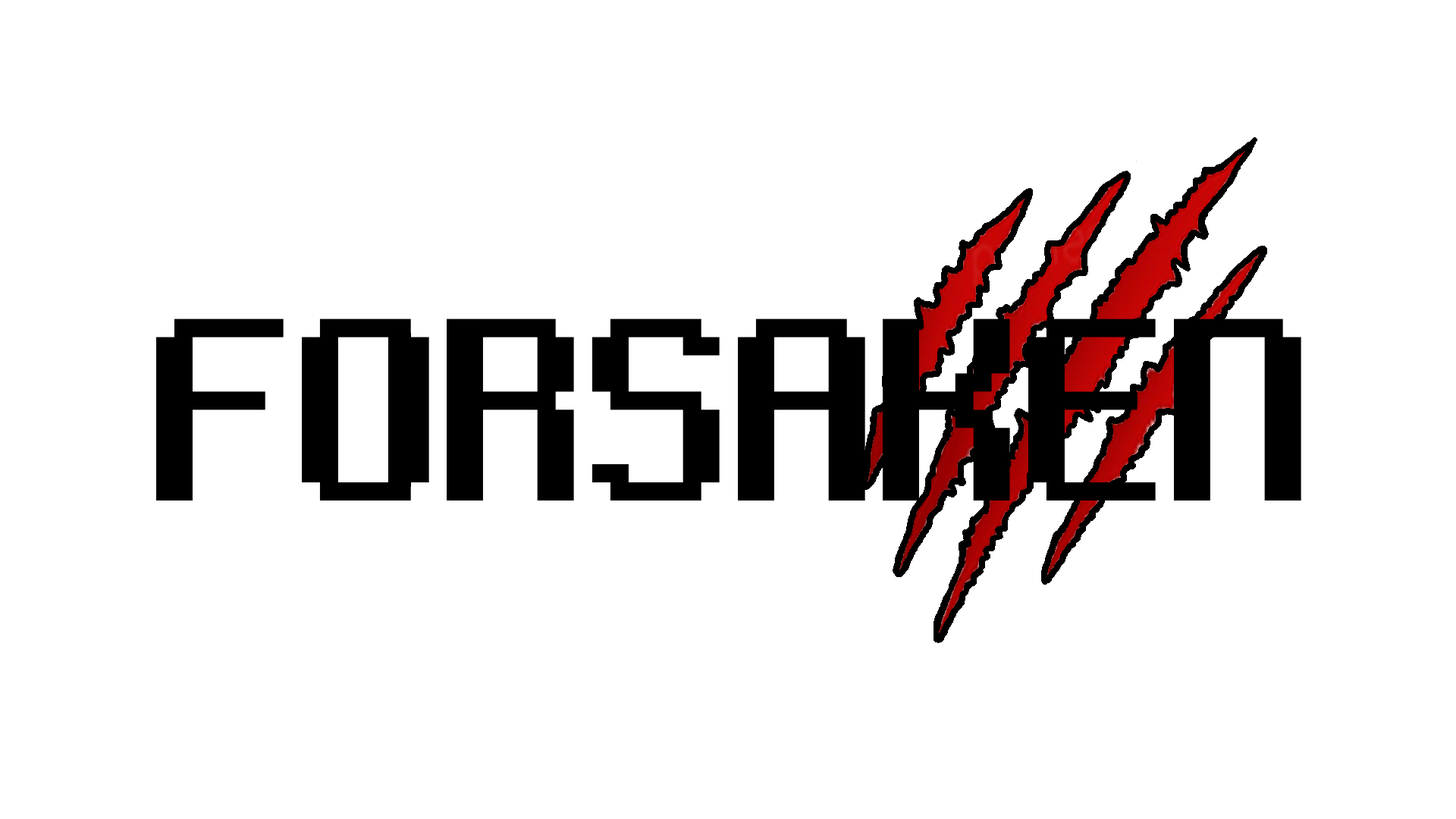
<style>
.page{position:relative;width:1456px;height:819px;background:#ffffff}
.page>*{position:absolute;margin:0}
.t1{font:290.7px "NeoDunggeunmo-Regular";color:#000000}
</style>
<div class="page">
<p class="t1" style="left:156px;top:318px;width:1145px;height:182px">FORSAKEN</p>
</div>
